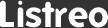
<style>
.page{position:relative;width:108px;height:28px;background:#333333}
.page>*{position:absolute;margin:0}
.t1{font:36px "Folks-Bold";color:#ffffff}
</style>
<div class="page">
<p class="t1" style="left:0px;top:0px;width:108px;height:28px">Listreo</p>
</div>
